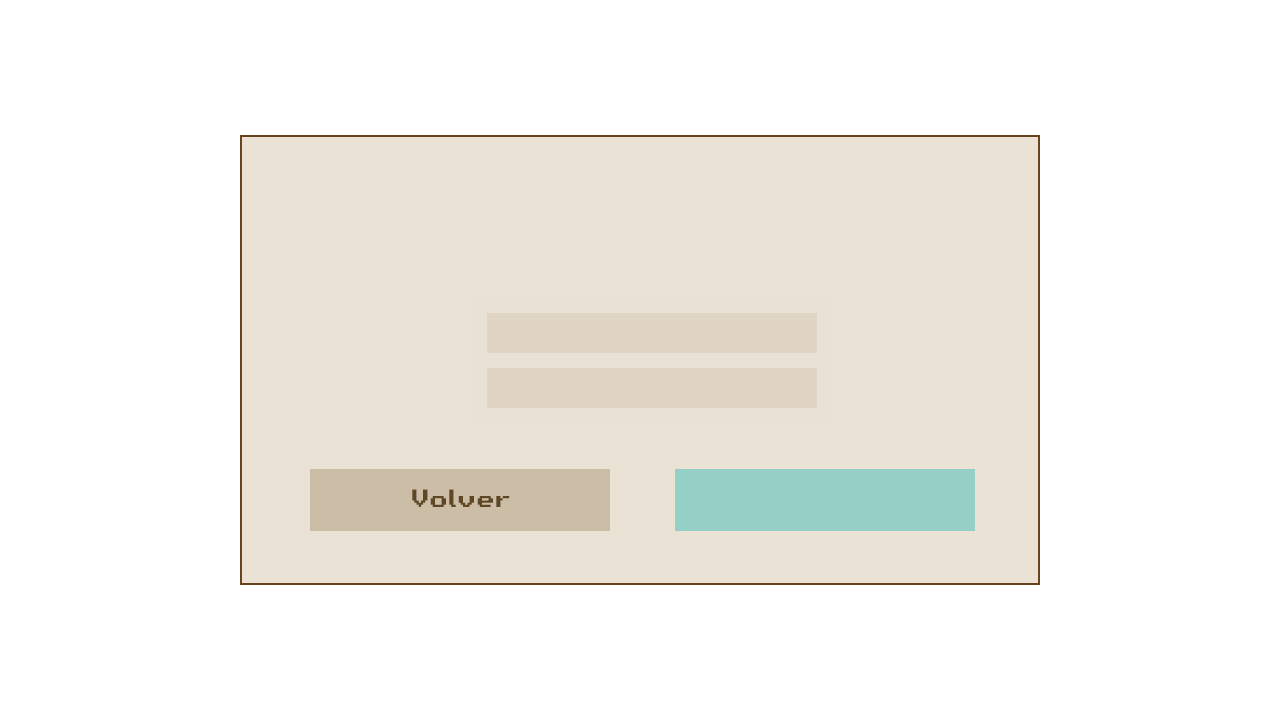
<style>
.page{position:relative;width:1280px;height:720px;background:#ffffff}
.page>*{position:absolute;margin:0}
.t1{font:24px "RetroGaming";color:#5f4724}
</style>
<div class="page">
<p class="t1" style="left:412px;top:489px;width:98px;height:18px">Volver</p>
</div>
